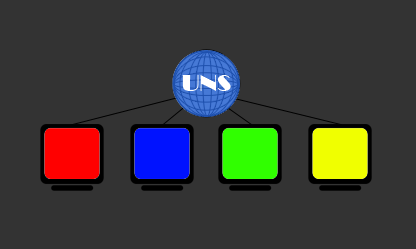
<style>
.page{position:relative;width:416px;height:249px;background:#333333}
.page>*{position:absolute;margin:0}
.t1{font:24px "Broadway";color:#ffffff}
</style>
<div class="page">
<p class="t1" style="left:182px;top:75px;width:49px;height:16px">UNS</p>
</div>
